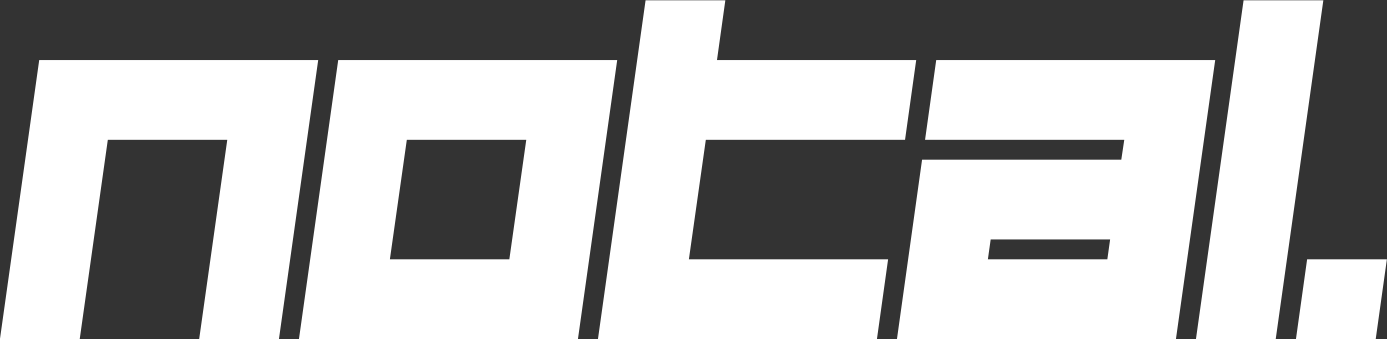
<style>
.page{position:relative;width:1387px;height:339px;background:#ffffff}
.page>*{position:absolute;margin:0}
.t1{font:408.4px "CorporationGames";color:#ffffff}
</style>
<div class="page">
<p class="t1" style="left:0px;top:0px;width:1387px;height:339px">notal.</p>
</div>
